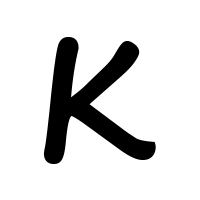
<style>
.page{position:relative;width:200px;height:200px;background:#ffffff}
.page>*{position:absolute;margin:0}
.t1{font:170px "SegoePrint-Bold";color:#000000}
</style>
<div class="page">
<p class="t1" style="left:43px;top:37px;width:113px;height:127px">K</p>
</div>
